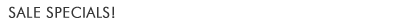
<style>
.page{position:relative;width:400px;height:24px;background:#ffffff}
.page>*{position:absolute;margin:0}
.t1{font:14.7px "FuturaBT-Light";letter-spacing:0.025em;color:#363636;text-transform:uppercase;font-weight:bold}
</style>
<div class="page">
<p class="t1" style="left:8px;top:6px;width:107px;height:12px">SALE SPECIALS!</p>
</div>
